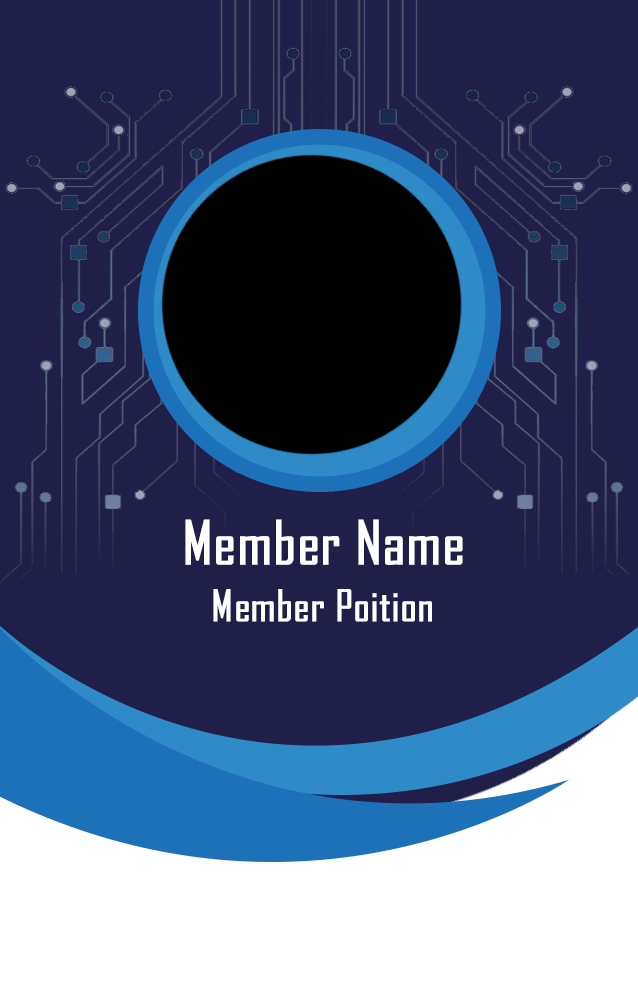
<style>
.page{position:relative;width:638px;height:1007px;background:#1f1f4a}
.page>*{position:absolute;margin:0}
.t1{font:58.3px "AgencyFB-Reg";letter-spacing:0.005em;color:#ffffff;font-weight:bold}
.t2{font:41.7px "AgencyFB-Reg";letter-spacing:0.005em;color:#ffffff;font-weight:bold}
</style>
<div class="page">
<p class="t1" style="left:185px;top:519px;width:278px;height:46px">Member Name</p>
<p class="t2" style="left:213px;top:589px;width:219px;height:33px">Member Poition</p>
</div>
